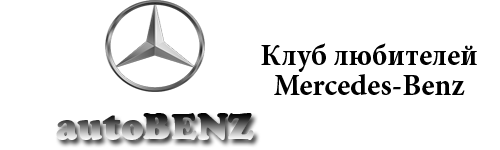
<style>
.page{position:relative;width:500px;height:150px;background:#ffffff}
.page>*{position:absolute;margin:0}
.t1{font:30px/30px "MinionPro-Bold";color:#000000}
.t2{font:36px "CooperBlackStd"}
</style>
<div class="page">
<p class="t1" style="left:261px;top:43px;width:216px;height:52px;text-align:center">Клуб любителей<br>Mercedes-Benz</p>
<p class="t2" style="left:56px;top:113px;width:198px;height:27px">autoBENZ</p>
</div>
